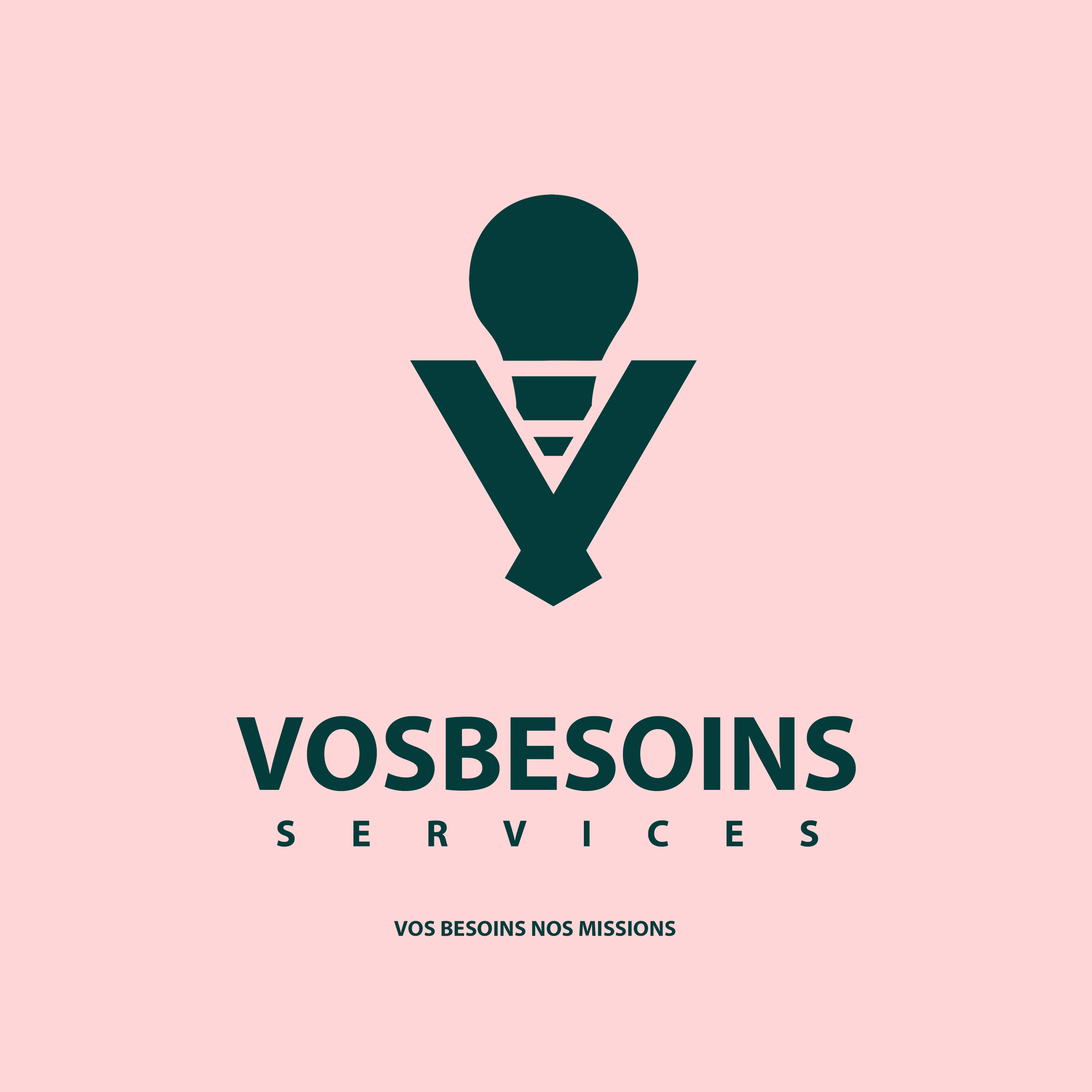
<style>
.page{position:relative;width:1092px;height:1092px;background:#fed6d7}
.page>*{position:absolute;margin:0}
.t1{font:107.7px "MyriadPro-Bold";color:#043c3b;text-transform:uppercase}
.t2{font:37.9px/56.5px "MyriadPro-Bold";letter-spacing:1.44em;color:#043c3b;text-transform:uppercase}
.t3{font:22.1px "MyriadPro-Bold";color:#043c3b}
</style>
<div class="page">
<p class="t1" style="left:236px;top:716px;width:620px;height:131px;text-align:center">VosBesoins<br><span class="t2">services</span></p>
<p class="t3" style="left:394px;top:921px;width:282px;height:15px">VOS BESOINS NOS MISSIONS</p>
</div>
